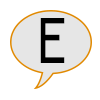
<style>
.page{position:relative;width:100px;height:100px;background:#ffffff}
.page>*{position:absolute;margin:0}
.t1{font:60px "Small Fonts";color:#000000}
</style>
<div class="page">
<p class="t1" style="left:40px;top:18px;width:25px;height:45px">E</p>
</div>
